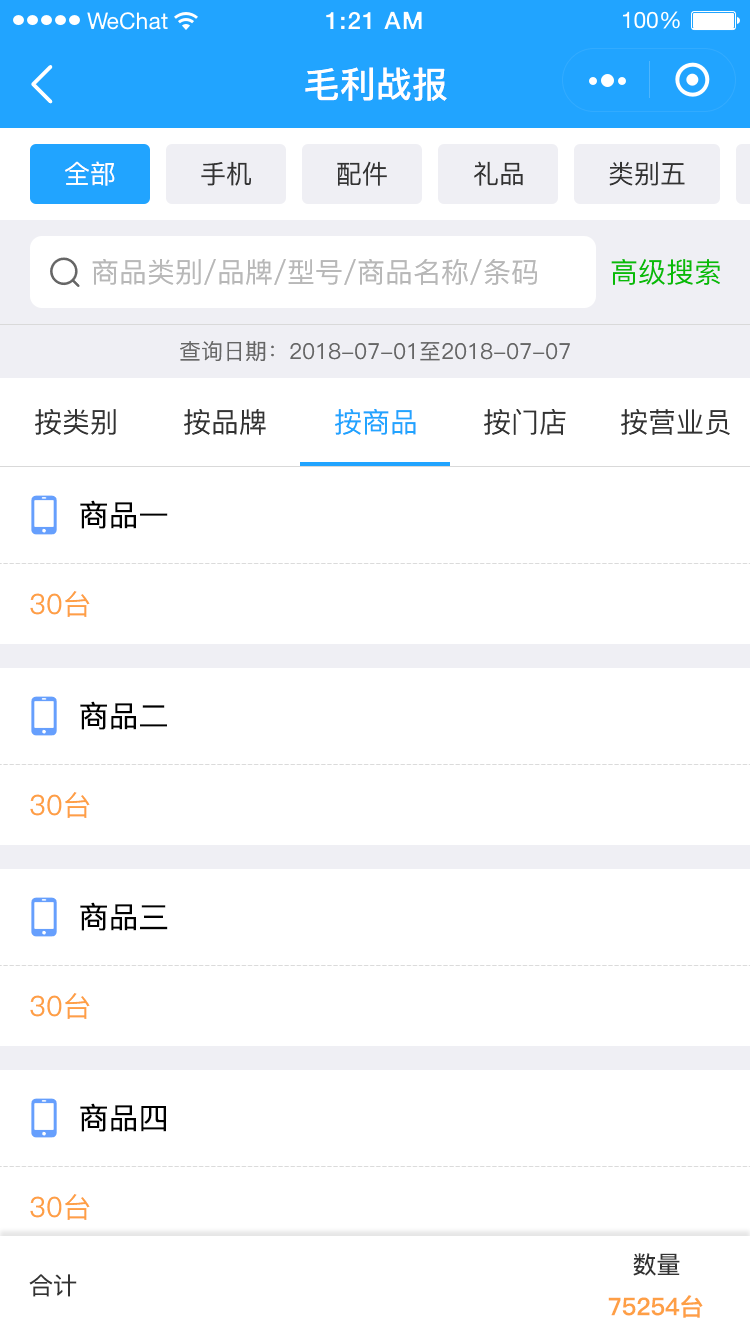
<style>
.page{position:relative;width:750px;height:1334px;background:#ffffff}
.page>*{position:absolute;margin:0}
.t1{font:36px "PingFang-SC-Bold";color:#ffffff}
.t2{font:26px "PingFang-SC-Medium";color:#ffffff}
.t3{font:26px "PingFang-SC-Medium";color:#333333}
.t4{font:28px "PingFang-SC-Medium";color:#b8b8b8}
.t5{font:28px "PingFang-SC-Medium";color:#09bb07}
.t6{font:22px "PingFang-SC-Medium";color:#666666}
.t7{font:28px "PingFang-SC-Medium";color:#333333}
.t8{font:28px "PingFang-SC-Medium";color:#21a4ff}
.t9{font:30px "PingFang-SC-Medium";color:#000000}
.t10{font:28px "PingFang-SC-Medium";color:#fe9f45}
.t11{font:24px "PingFang-SC-Medium";color:#333333}
.t12{font:24px "PingFang-SC-Bold";color:#fe9f45}
</style>
<div class="page">
<p class="t1" style="left:305px;top:67px;width:142px;height:34px">毛利战报</p>
<p class="t2" style="left:65px;top:161px;width:50px;height:25px">全部</p>
<p class="t3" style="left:201px;top:161px;width:50px;height:25px">手机</p>
<p class="t3" style="left:337px;top:161px;width:50px;height:25px">配件</p>
<p class="t3" style="left:474px;top:161px;width:49px;height:25px">礼品</p>
<p class="t3" style="left:609px;top:161px;width:76px;height:25px">类别五</p>
<p class="t4" style="left:92px;top:258px;width:445px;height:27px">商品类别/品牌/型号/商品名称/条码</p>
<p class="t5" style="left:611px;top:259px;width:109px;height:26px">高级搜索</p>
<p class="t6" style="left:180px;top:341px;width:390px;height:21px">查询日期：2018-07-01至2018-07-07</p>
<p class="t7" style="left:35px;top:409px;width:81px;height:26px">按类别</p>
<p class="t7" style="left:184px;top:409px;width:82px;height:26px">按品牌</p>
<p class="t8" style="left:335px;top:409px;width:81px;height:26px">按商品</p>
<p class="t7" style="left:484px;top:409px;width:82px;height:26px">按门店</p>
<p class="t7" style="left:621px;top:409px;width:109px;height:26px">按营业员</p>
<p class="t9" style="left:80px;top:500px;width:88px;height:29px">商品一</p>
<p class="t10" style="left:30px;top:591px;width:60px;height:26px">30台</p>
<p class="t9" style="left:80px;top:701px;width:87px;height:29px">商品二</p>
<p class="t10" style="left:30px;top:792px;width:60px;height:26px">30台</p>
<p class="t9" style="left:80px;top:902px;width:88px;height:29px">商品三</p>
<p class="t10" style="left:30px;top:993px;width:60px;height:26px">30台</p>
<p class="t9" style="left:80px;top:1103px;width:86px;height:29px">商品四</p>
<p class="t10" style="left:30px;top:1194px;width:60px;height:26px">30台</p>
<p class="t11" style="left:633px;top:1253px;width:47px;height:23px">数量</p>
<p class="t11" style="left:29px;top:1274px;width:48px;height:23px">合计</p>
<p class="t12" style="left:608px;top:1295px;width:95px;height:23px">75254台</p>
</div>
